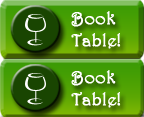
<style>
.page{position:relative;width:144px;height:117px}
.page>*{position:absolute;margin:0}
.t1{font:18px "Harrington";color:#ffffff;font-weight:bold}
</style>
<div class="page">
<p class="t1" style="left:71px;top:11px;width:50px;height:38px">Book<br>Table!</p>
<p class="t1" style="left:71px;top:70px;width:50px;height:38px">Book<br>Table!</p>
</div>
